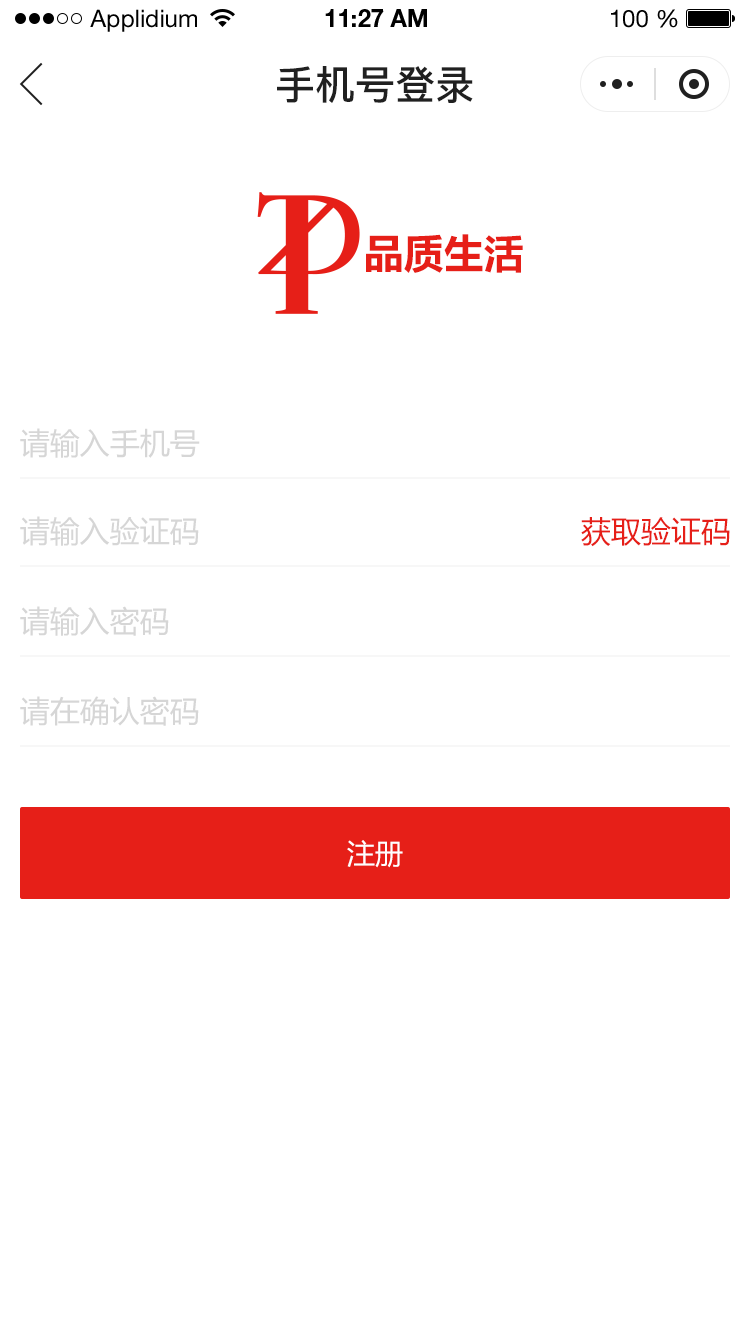
<style>
.page{position:relative;width:750px;height:1334px;background:#ffffff}
.page>*{position:absolute;margin:0}
.t1{font:24px "HelveticaNeueLTStd-Roman";color:#000000}
.t2{font:24px "HelveticaNeueLTStd-Bd";color:#000000}
.t3{font:40px "PingFang-SC-Bold";color:#202020;text-transform:uppercase}
.t4{font:40px "MicrosoftYaHei-Bold";color:#e61f18;text-transform:uppercase}
.t5{font:30px "MicrosoftYaHei";color:#d6d6d6;text-transform:uppercase}
.t6{font:30px "MicrosoftYaHei";color:#e61f18;text-transform:uppercase}
.t7{font:28px "MicrosoftYaHei";color:#ffffff;text-transform:uppercase}
</style>
<div class="page">
<p class="t1" style="left:90px;top:9px;width:107px;height:23px">Applidium</p>
<p class="t2" style="left:325px;top:9px;width:102px;height:18px">11:27 AM</p>
<p class="t1" style="left:611px;top:9px;width:67px;height:19px">100 %</p>
<p class="t3" style="left:277px;top:66px;width:196px;height:37px">手机号登录</p>
<p class="t4" style="left:366px;top:234px;width:157px;height:39px">品质生活</p>
<p class="t5" style="left:20px;top:428px;width:180px;height:30px">请输入手机号</p>
<p class="t5" style="left:20px;top:516px;width:179px;height:30px">请输入验证码</p>
<p class="t6" style="left:581px;top:517px;width:149px;height:30px">获取验证码</p>
<p class="t5" style="left:20px;top:606px;width:149px;height:30px">请输入密码</p>
<p class="t5" style="left:20px;top:696px;width:179px;height:30px">请在确认密码</p>
<p class="t7" style="left:347px;top:840px;width:56px;height:28px">注册</p>
</div>
